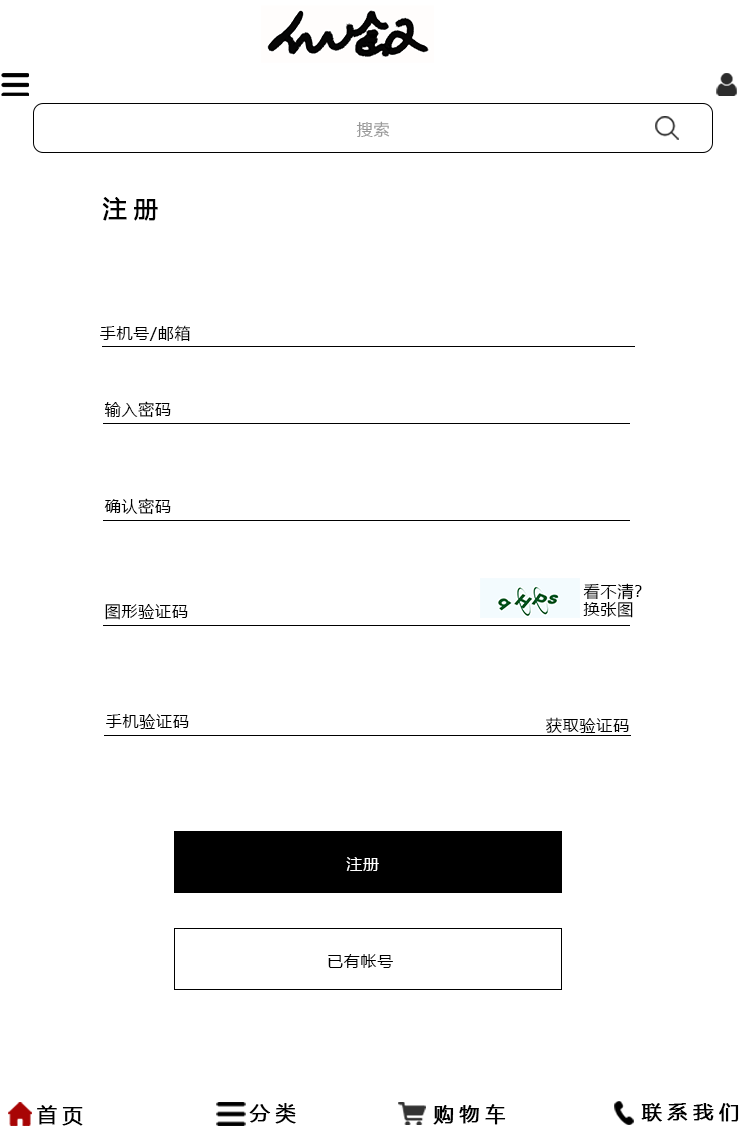
<style>
.page{position:relative;width:750px;height:1134px;background:#ffffff}
.page>*{position:absolute;margin:0}
.t1{font:16px "MicrosoftYaHei";letter-spacing:0.05em;color:#999999}
.t2{font:24px "MicrosoftYaHei";letter-spacing:0.26em;color:#000000;font-weight:bold}
.t3{font:16px "MicrosoftYaHei";letter-spacing:0.05em;color:#000000}
.t4{font:16px/18px "MicrosoftYaHei";letter-spacing:0.05em;color:#000000}
.t5{font:16px "MicrosoftYaHei";letter-spacing:0.05em;color:#ffffff}
.t6{font:20px "MicrosoftYaHei";letter-spacing:0.26em;color:#000000;font-weight:bold}
</style>
<div class="page">
<p class="t1" style="left:356px;top:121px;width:34px;height:16px">搜索</p>
<p class="t2" style="left:102px;top:197px;width:56px;height:24px">注册</p>
<p class="t3" style="left:100px;top:325px;width:90px;height:17px">手机号/邮箱</p>
<p class="t3" style="left:104px;top:401px;width:67px;height:17px">输入密码</p>
<p class="t3" style="left:104px;top:498px;width:67px;height:17px">确认密码</p>
<p class="t4" style="left:583px;top:583px;width:59px;height:35px">看不清？<br>换张图</p>
<p class="t3" style="left:105px;top:604px;width:83px;height:16px">图形验证码</p>
<p class="t3" style="left:106px;top:714px;width:83px;height:15px">手机验证码</p>
<p class="t3" style="left:546px;top:717px;width:83px;height:16px">获取验证码</p>
<p class="t5" style="left:346px;top:857px;width:33px;height:14px">注册</p>
<p class="t3" style="left:328px;top:954px;width:65px;height:14px">已有帐号</p>
<p class="t6" style="left:37px;top:1105px;width:46px;height:21px">首页</p>
<p class="t6" style="left:249px;top:1103px;width:47px;height:21px">分类</p>
<p class="t6" style="left:433px;top:1104px;width:73px;height:21px">购物车</p>
<p class="t6" style="left:641px;top:1103px;width:98px;height:19px">联系我们</p>
</div>
